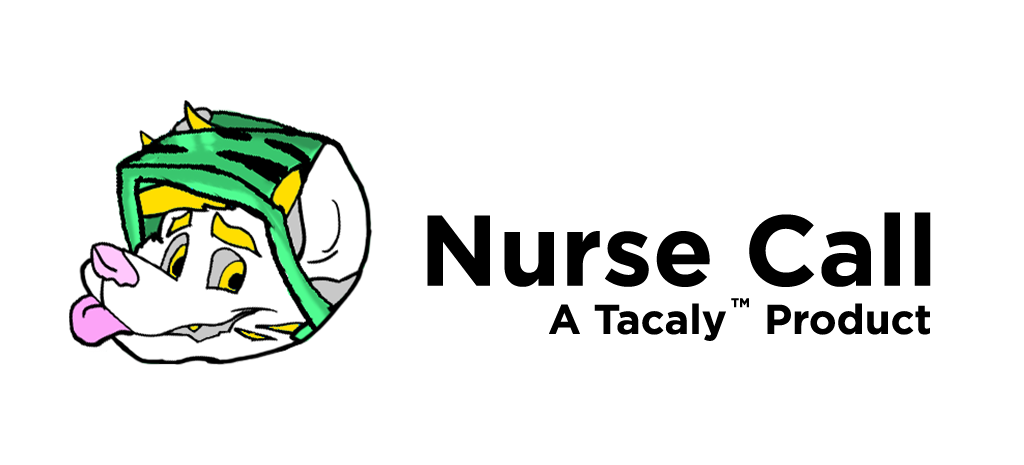
<style>
.page{position:relative;width:1024px;height:465px;background:#ffffff}
.page>*{position:absolute;margin:0}
.t1{font:100px "Gotham-Bold";color:#000000}
.t2{font:41.7px "Gotham-Bold";color:#000000}
.t3{font:12.5px "Gotham-Bold";color:#000000}
</style>
<div class="page">
<p class="t1" style="left:427px;top:212px;width:504px;height:75px">Nurse Call</p>
<p class="t2" style="left:549px;top:303px;width:381px;height:38px">A Tacaly   Product</p>
<p class="t3" style="left:731px;top:298px;width:18px;height:10px">TM</p>
</div>
